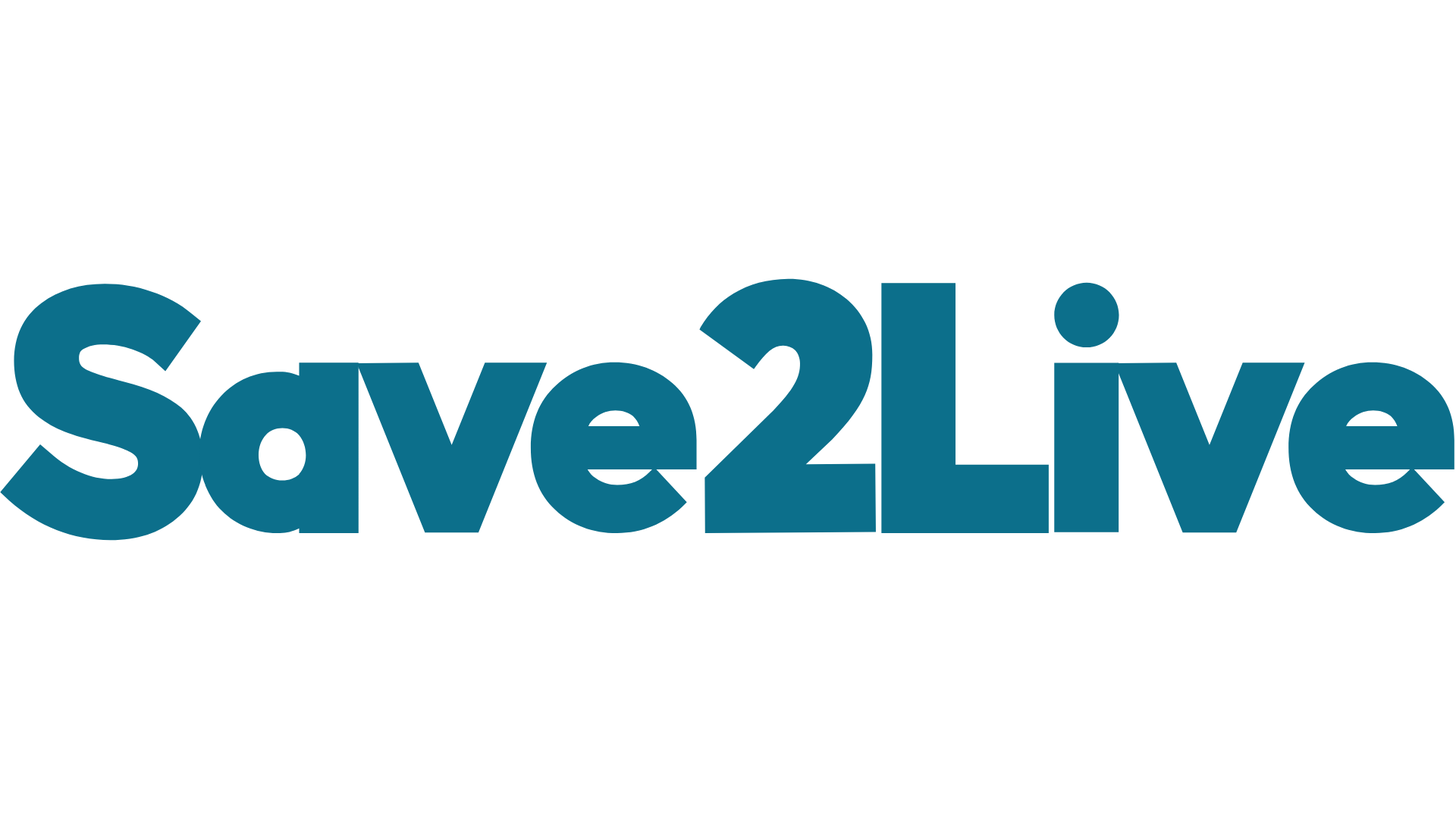
<style>
.page{position:relative;width:1456px;height:819px;background:#ffffff}
.page>*{position:absolute;margin:0}
.t1{font:293.9px "IndigoRegular-Regular";color:#0c6f8b}
</style>
<div class="page">
<p class="t1" style="left:0px;top:278px;width:1454px;height:263px">Save2Live</p>
</div>
